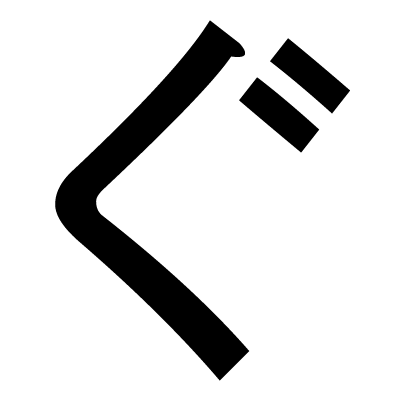
<style>
.page{position:relative;width:400px;height:400px;background:#ffffff}
.page>*{position:absolute;margin:0}
.t1{font:416.7px "MS-PGothic";color:#000000}
</style>
<div class="page">
<p class="t1" style="left:55px;top:20px;width:295px;height:361px">ぐ</p>
</div>
